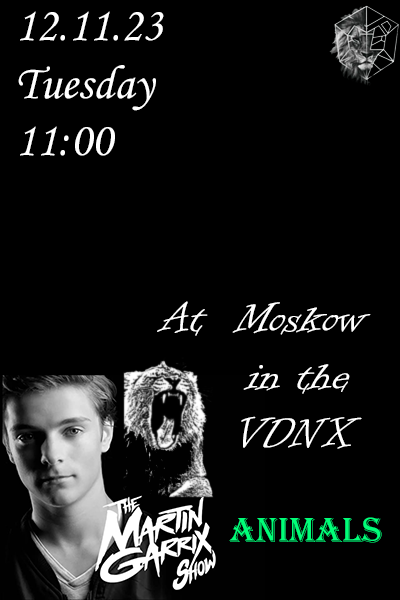
<style>
.page{position:relative;width:400px;height:600px;background:#000000}
.page>*{position:absolute;margin:0}
.t1{font:48px "MonotypeCorsiva";color:#ffffff}
.t2{font:48px "InformalRoman-Regular";color:#ffffff}
.t3{font:36px "Algerian";color:#00ff78}
</style>
<div class="page">
<p class="t1" style="left:18px;top:11px;width:146px;height:145px">12.11.23<br>Tuesday<br>11:00</p>
<p class="t2" style="left:157px;top:301px;width:214px;height:148px">At  Moskow<br>    in the  <br>  VDNX</p>
<p class="t3" style="left:229px;top:517px;width:153px;height:26px">Animals</p>
</div>
